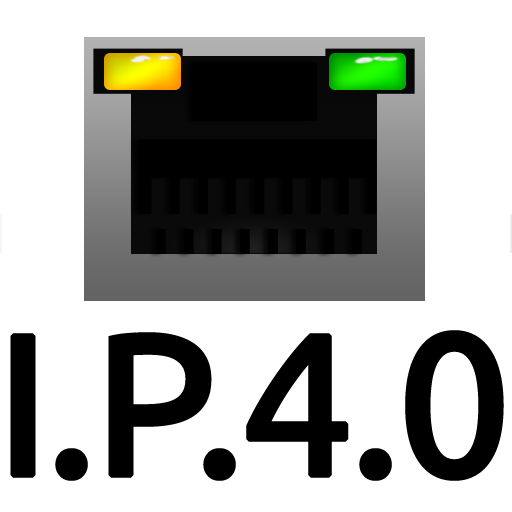
<style>
.page{position:relative;width:512px;height:512px;background:#ffffff}
.page>*{position:absolute;margin:0}
.t1{font:200px "Ubuntu";letter-spacing:-0.04em;color:#000000;font-weight:bold}
</style>
<div class="page">
<p class="t1" style="left:10px;top:330px;width:494px;height:151px">I.P.4.0</p>
</div>
